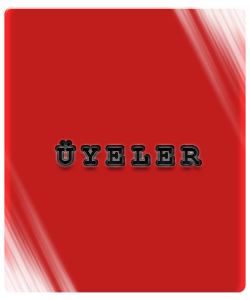
<style>
.page{position:relative;width:250px;height:300px;background:#c01d1d}
.page>*{position:absolute;margin:0}
.t1{font:29.3px "CourierNewPS-BoldMT";letter-spacing:0.25em;color:#101010}
.t2{font:27.8px "CourierNewPS-BoldMT";letter-spacing:0.299em;color:#0d0d0d}
</style>
<div class="page">
<p class="t1" style="left:57px;top:142px;width:143px;height:22px">ÜYELER</p>
<p class="t2" style="left:57px;top:143px;width:143px;height:21px">ÜYELER</p>
</div>
